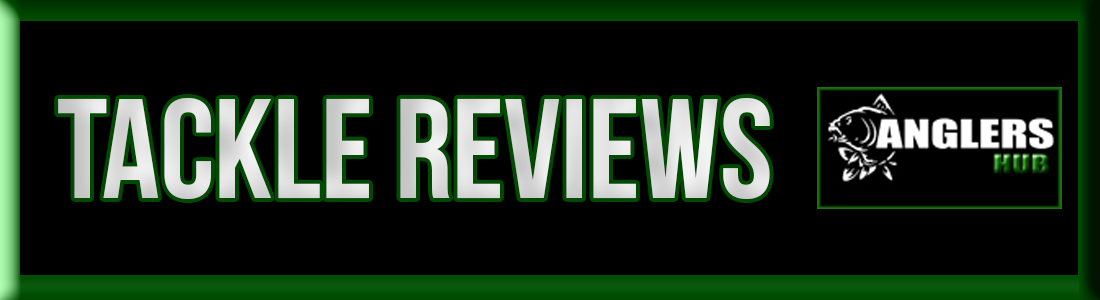
<style>
.page{position:relative;width:1100px;height:300px;background:#000000}
.page>*{position:absolute;margin:0}
.t1{font:141.7px "BebasNeue";color:#dfdfdf}
</style>
<div class="page">
<p class="t1" style="left:58px;top:97px;width:712px;height:103px">Tackle Reviews</p>
</div>
